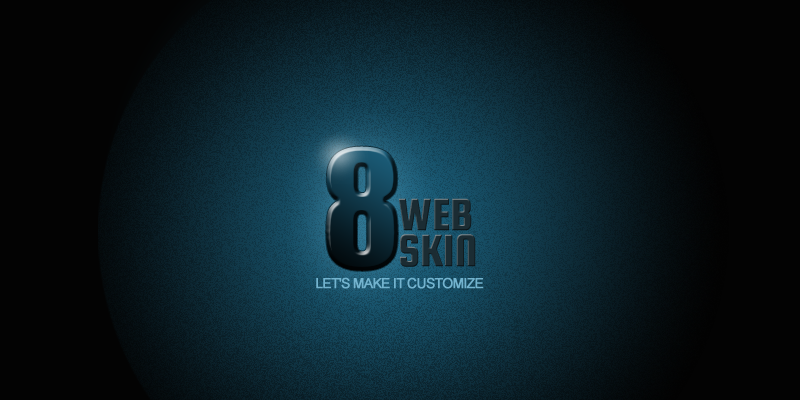
<style>
.page{position:relative;width:800px;height:400px;background:#030303}
.page>*{position:absolute;margin:0}
.t1{font:150px "Impact";letter-spacing:-0.025em;font-weight:bold}
.t2{font:48px/36px "SquadaOne-Regular";letter-spacing:-0.025em;color:#1a2c33;font-weight:bold}
.t3{font:14px "ArialMT";letter-spacing:-0.075em;color:#73b3ce;font-weight:bold}
</style>
<div class="page">
<p class="t1" style="left:326px;top:146px;width:72px;height:125px">8</p>
<p class="t2" style="left:398px;top:198px;width:78px;height:69px">WEB<br>SKIN</p>
<p class="t3" style="left:316px;top:277px;width:168px;height:12px">LET'S MAKE IT CUSTOMIZE</p>
</div>
